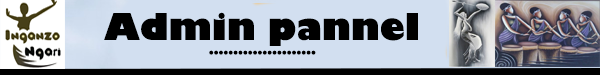
<style>
.page{position:relative;width:600px;height:75px;background:#d2dff0}
.page>*{position:absolute;margin:0}
.t1{font:12px "GillSans-UltraBold";color:#000000}
.t2{font:36px "GillSans-UltraBold";color:#000000}
</style>
<div class="page">
<p class="t1" style="left:104px;top:12px;width:314px;height:43px;text-align:center"><span class="t2">Admin pannel<br></span>......................</p>
</div>
